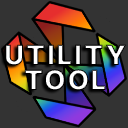
<style>
.page{position:relative;width:128px;height:128px;background:#333333}
.page>*{position:absolute;margin:0}
.t1{font:28px/25px "Inter-Black";letter-spacing:0.06em;font-weight:bold}
</style>
<div class="page">
<p class="t1" style="left:5px;top:44px;width:121px;height:47px;text-align:center">UTILITY<br>TOOL</p>
</div>
